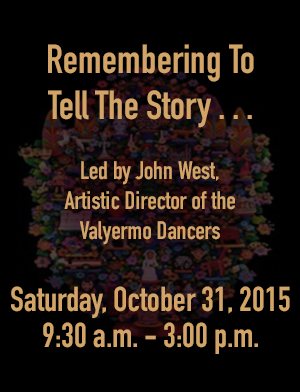
<style>
.page{position:relative;width:300px;height:392px;background:#000000}
.page>*{position:absolute;margin:0}
.t1{font:25px/30px "DINCondensed-Bold";color:#d2a467}
.t2{font:40px/46px "DINCondensed-Bold";color:#d2a467}
.t3{font:34px/36px "DINCondensed-Bold";color:#d2a467}
</style>
<div class="page">
<p class="t1" style="left:11px;top:44px;width:279px;height:310px;text-align:center"><span class="t2">Remembering To <br>Tell The Story . . .<br></span><br>Led by John West, <br>Artistic Director of the <br>Valyermo Dancers<br><br><span class="t3">Saturday, October 31, 2015<br>9:30 a.m. - 3:00 p.m.</span></p>
</div>
